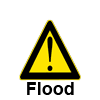
<style>
.page{position:relative;width:100px;height:100px;background:#ffffff}
.page>*{position:absolute;margin:0}
.t1{font:18px "Arial-BoldMT";color:#000000}
</style>
<div class="page">
<p class="t1" style="left:27px;top:82px;width:47px;height:13px">Flood</p>
</div>
